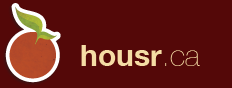
<style>
.page{position:relative;width:232px;height:88px;background:#540808}
.page>*{position:absolute;margin:0}
.t1{font:30px "HelveticaNeue-Bold";color:#f5dda5}
.t2{font:30px "HelveticaNeue-UltraLight";color:#f5dda5}
</style>
<div class="page">
<p class="t1" style="left:81px;top:45px;width:119px;height:21px">housr<span class="t2">.ca</span></p>
</div>
